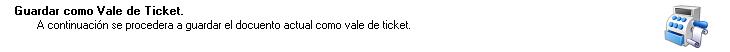
<style>
.page{position:relative;width:730px;height:52px;background:#ffffff}
.page>*{position:absolute;margin:0}
.t1{font:11.4px "MS Sans Serif";color:#000000;font-weight:bold}
.t2{font:11.4px "MS Sans Serif";color:#000000}
</style>
<div class="page">
<p class="t1" style="left:15px;top:6px;width:168px;height:9px">Guardar como Vale de Ticket.</p>
<p class="t2" style="left:37px;top:20px;width:373px;height:11px">A continuación se procedera a guardar el docuento actual como vale de ticket.</p>
</div>
